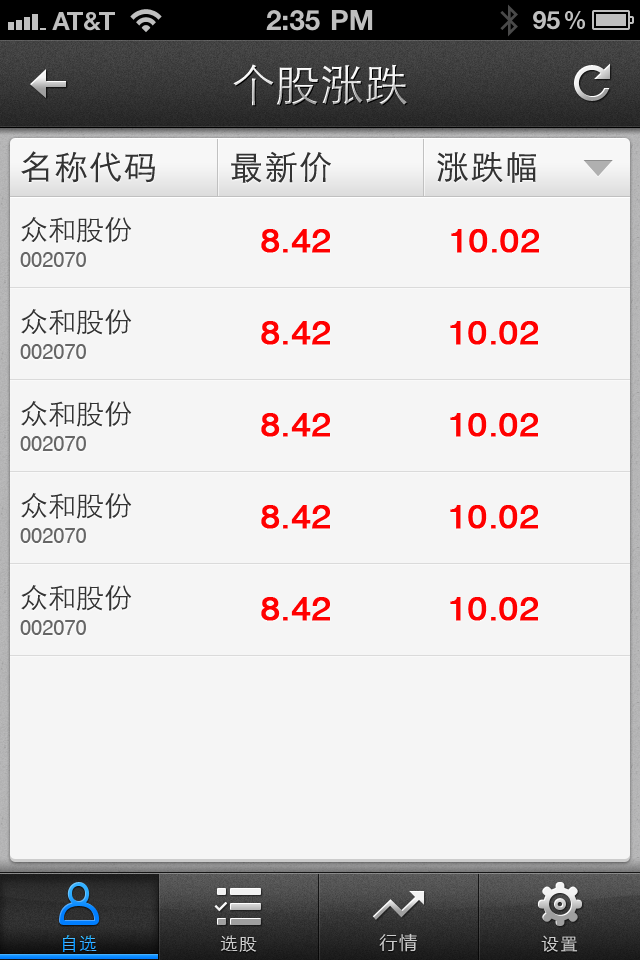
<style>
.page{position:relative;width:640px;height:960px;background:#f5f5f5}
.page>*{position:absolute;margin:0}
.t1{font:44px "STXihei";letter-spacing:0.005em}
.t2{font:33px "STXihei";letter-spacing:0.05em;color:#333333}
.t3{font:28px "STXihei";color:#333333}
.t4{font:33.2px "HelveticaCE-Regular";color:#ff0000;font-weight:bold;scale:1.05 1}
.t5{font:20px "HelveticaCE-Regular";color:#5c6370}
.t6{font:18px "STXihei";letter-spacing:0.05em}
.t7{font:18px "STXihei";letter-spacing:0.05em;color:#cccccc}
.t8{font:18px "MicrosoftYaHei";letter-spacing:0.1em;color:#cccccc}
</style>
<div class="page">
<p class="t1" style="left:233px;top:64px;width:174px;height:42px">个股涨跌</p>
<p class="t2" style="left:21px;top:151px;width:134px;height:32px">名称代码</p>
<p class="t2" style="left:231px;top:151px;width:100px;height:32px">最新价</p>
<p class="t2" style="left:437px;top:152px;width:99px;height:31px">涨跌幅</p>
<p class="t3" style="left:21px;top:217px;width:111px;height:26px">众和股份</p>
<p class="t4" style="left:261px;top:229px;width:69px;height:24px">8.42</p>
<p class="t4" style="left:451px;top:229px;width:88px;height:24px">10.02</p>
<p class="t5" style="left:20px;top:252px;width:66px;height:15px">002070</p>
<p class="t3" style="left:21px;top:309px;width:111px;height:26px">众和股份</p>
<p class="t4" style="left:261px;top:321px;width:69px;height:24px">8.42</p>
<p class="t4" style="left:450px;top:321px;width:88px;height:24px">10.02</p>
<p class="t5" style="left:20px;top:344px;width:66px;height:15px">002070</p>
<p class="t3" style="left:21px;top:401px;width:111px;height:26px">众和股份</p>
<p class="t4" style="left:261px;top:413px;width:69px;height:24px">8.42</p>
<p class="t4" style="left:450px;top:413px;width:88px;height:24px">10.02</p>
<p class="t5" style="left:20px;top:436px;width:66px;height:15px">002070</p>
<p class="t3" style="left:21px;top:493px;width:111px;height:26px">众和股份</p>
<p class="t4" style="left:261px;top:505px;width:69px;height:24px">8.42</p>
<p class="t4" style="left:450px;top:505px;width:88px;height:24px">10.02</p>
<p class="t5" style="left:20px;top:528px;width:66px;height:15px">002070</p>
<p class="t3" style="left:21px;top:585px;width:111px;height:26px">众和股份</p>
<p class="t4" style="left:261px;top:597px;width:69px;height:24px">8.42</p>
<p class="t4" style="left:450px;top:597px;width:88px;height:24px">10.02</p>
<p class="t5" style="left:20px;top:620px;width:66px;height:15px">002070</p>
<p class="t6" style="left:62px;top:935px;width:35px;height:17px">自选</p>
<p class="t7" style="left:220px;top:935px;width:37px;height:17px">选股</p>
<p class="t8" style="left:379px;top:933px;width:38px;height:19px">行情</p>
<p class="t7" style="left:541px;top:935px;width:37px;height:17px">设置</p>
</div>
